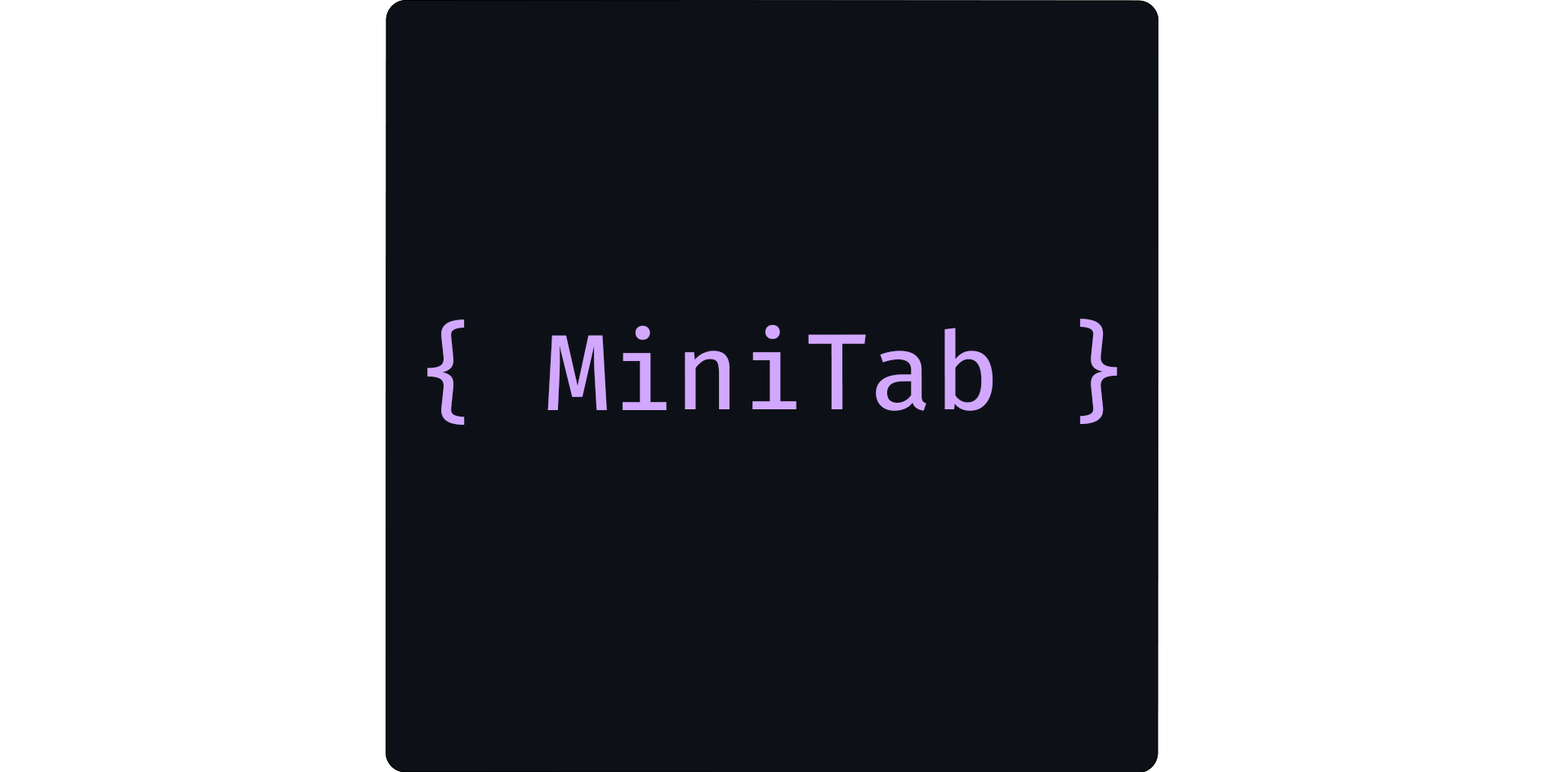
<style>
.page{position:relative;width:1544px;height:772px;background:#ffffff}
.page>*{position:absolute;margin:0}
.t1{font:105.5px "FiraCodeNF-Ret";color:#d2a8ff}
</style>
<div class="page">
<p class="t1" style="left:427px;top:319px;width:691px;height:106px">{ MiniTab }</p>
</div>
